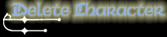
<style>
.page{position:relative;width:167px;height:37px;background:#000000}
.page>*{position:absolute;margin:0}
.t1{font:18px "Celtic-CondensedNormal";color:#94b2da}
.t2{font:18px "CathedralExtendedNormal";color:#94b2da}
</style>
<div class="page">
<p class="t1" style="left:12px;top:2px;width:153px;height:15px"><span class="t2">D</span>elete <span class="t2">C</span>haracter</p>
</div>
